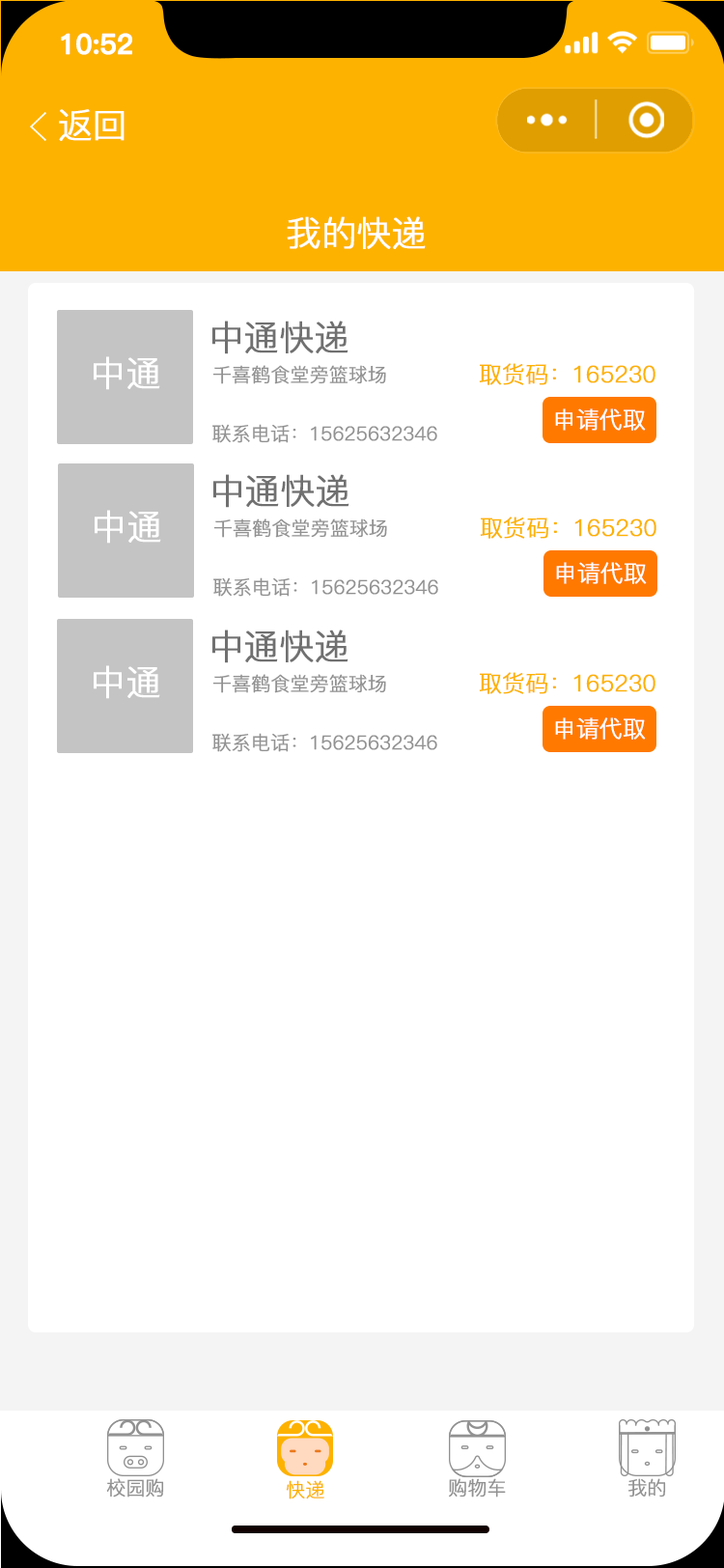
<style>
.page{position:relative;width:724px;height:1568px;background:#ffffff}
.page>*{position:absolute;margin:0}
.t1{font:27.5px "PingFang-SC-Bold";letter-spacing:-0.02em;color:#ffffff;font-weight:bold}
.t2{font:34.8px "PingFang-SC-Regular";letter-spacing:-0.02em;color:#ffffff;font-weight:bold}
.t3{font:34.8px "PingFang-SC-Regular";letter-spacing:-0.02em;color:#707070;font-weight:bold}
.t4{font:19.3px "PingFang-SC-Regular";letter-spacing:-0.02em;color:#919191;font-weight:bold}
.t5{font:23.2px "PingFang-SC-Regular";letter-spacing:-0.02em;color:#fdb200;font-weight:bold}
.t6{font:23.2px "PingFang-SC-Regular";letter-spacing:-0.02em;color:#ffffff;font-weight:bold}
.t7{font:19.3px "PingFang-SC-Regular";letter-spacing:-0.02em;color:#fdb200;font-weight:bold}
</style>
<div class="page">
<p class="t1" style="left:61px;top:33px;width:71px;height:22px">10:52</p>
<p class="t2" style="left:59px;top:109px;width:66px;height:32px">返回</p>
<p class="t2" style="left:287px;top:216px;width:139px;height:33px">我的快递</p>
<p class="t3" style="left:212px;top:321px;width:137px;height:33px">中通快递</p>
<p class="t2" style="left:94px;top:356px;width:66px;height:34px">中通</p>
<p class="t4" style="left:212px;top:365px;width:174px;height:19px">千喜鹤食堂旁篮球场</p>
<p class="t5" style="left:479px;top:363px;width:177px;height:22px">取货码：165230</p>
<p class="t6" style="left:555px;top:408px;width:91px;height:23px">申请代取</p>
<p class="t4" style="left:212px;top:424px;width:225px;height:19px">联系电话：15625632346</p>
<p class="t3" style="left:213px;top:474px;width:137px;height:34px">中通快递</p>
<p class="t2" style="left:95px;top:510px;width:66px;height:34px">中通</p>
<p class="t4" style="left:213px;top:518px;width:174px;height:20px">千喜鹤食堂旁篮球场</p>
<p class="t5" style="left:480px;top:517px;width:177px;height:22px">取货码：165230</p>
<p class="t6" style="left:556px;top:562px;width:91px;height:22px">申请代取</p>
<p class="t4" style="left:213px;top:577px;width:225px;height:20px">联系电话：15625632346</p>
<p class="t3" style="left:212px;top:630px;width:137px;height:33px">中通快递</p>
<p class="t2" style="left:94px;top:665px;width:66px;height:34px">中通</p>
<p class="t4" style="left:212px;top:674px;width:174px;height:19px">千喜鹤食堂旁篮球场</p>
<p class="t5" style="left:479px;top:672px;width:177px;height:22px">取货码：165230</p>
<p class="t6" style="left:555px;top:717px;width:91px;height:23px">申请代取</p>
<p class="t4" style="left:212px;top:733px;width:225px;height:19px">联系电话：15625632346</p>
<p class="t4" style="left:106px;top:1478px;width:58px;height:20px">校园购</p>
<p class="t7" style="left:286px;top:1480px;width:38px;height:19px">快递</p>
<p class="t4" style="left:449px;top:1478px;width:57px;height:20px">购物车</p>
<p class="t4" style="left:629px;top:1478px;width:37px;height:20px">我的</p>
</div>
